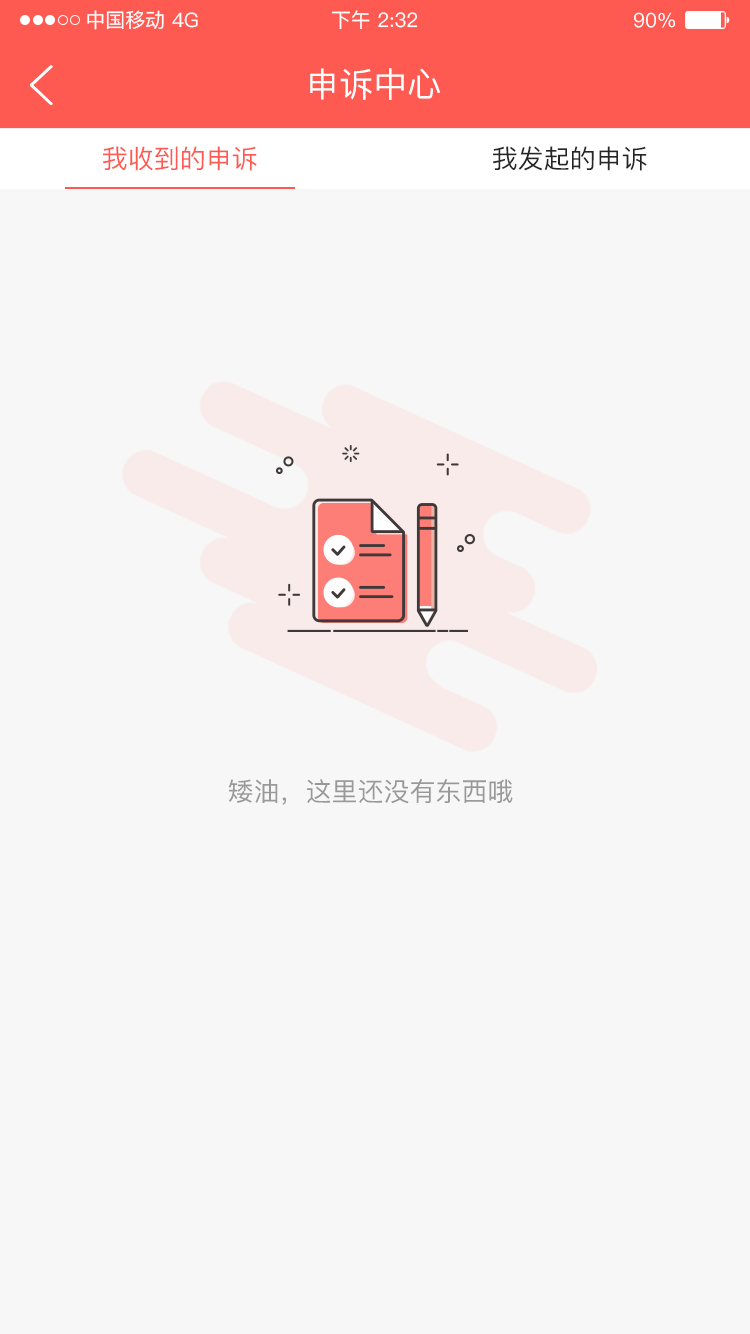
<style>
.page{position:relative;width:750px;height:1334px;background:#f7f7f7}
.page>*{position:absolute;margin:0}
.t1{font:20px "PingFang-SC-Medium";color:#ffffff}
.t2{font:34px "PingFang-SC-Medium";color:#ffffff}
.t3{font:26px "PingFang-SC-Medium";color:#fe5a51}
.t4{font:26px "PingFang-SC-Medium";color:#262626}
.t5{font:26px "PingFang-SC-Medium";color:#999999}
</style>
<div class="page">
<p class="t1" style="left:87px;top:10px;width:77px;height:20px">中国移动</p>
<p class="t1" style="left:172px;top:12px;width:26px;height:16px">4G</p>
<p class="t1" style="left:331px;top:10px;width:87px;height:20px">下午 2:32</p>
<p class="t1" style="left:634px;top:12px;width:41px;height:16px">90%</p>
<p class="t2" style="left:310px;top:68px;width:130px;height:32px">申诉中心</p>
<p class="t3" style="left:103px;top:146px;width:154px;height:25px">我收到的申诉</p>
<p class="t4" style="left:493px;top:146px;width:154px;height:25px">我发起的申诉</p>
<p class="t5" style="left:228px;top:779px;width:285px;height:26px">矮油，这里还没有东西哦</p>
</div>
